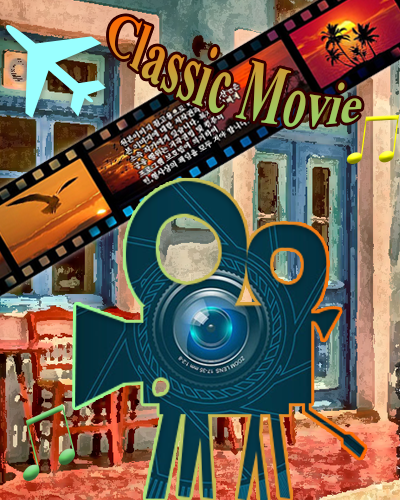
<style>
.page{position:relative;width:400px;height:500px}
.page>*{position:absolute;margin:0}
.t1{font:45px "TimesNewRomanPS-BoldMT"}
</style>
<div class="page">
<p class="t1" style="left:109px;top:16px;width:253px;height:111px;rotate:17deg">Classic Movie</p>
</div>
